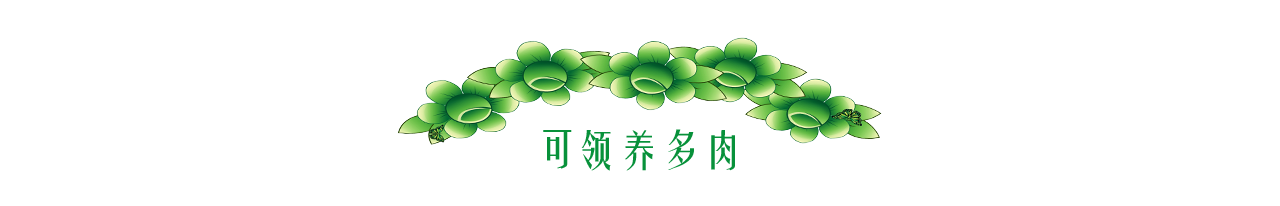
<style>
.page{position:relative;width:1280px;height:206px;background:#ffffff}
.page>*{position:absolute;margin:0}
.t1{font:41.7px "FZYTK--GBK1-0";color:#07913a}
</style>
<div class="page">
<p class="t1" style="left:543px;top:129px;width:192px;height:42px">可领养多肉</p>
</div>
